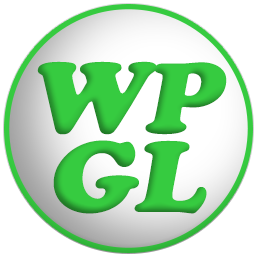
<style>
.page{position:relative;width:256px;height:256px;background:#ffffff}
.page>*{position:absolute;margin:0}
.t1{font:105px "CooperBlack";letter-spacing:-0.025em;color:#36cb40;font-style:italic;scale:1.07 1}
</style>
<div class="page">
<p class="t1" style="left:37px;top:61px;width:190px;height:74px">WP</p>
<p class="t1" style="left:53px;top:140px;width:154px;height:74px">GL</p>
</div>
